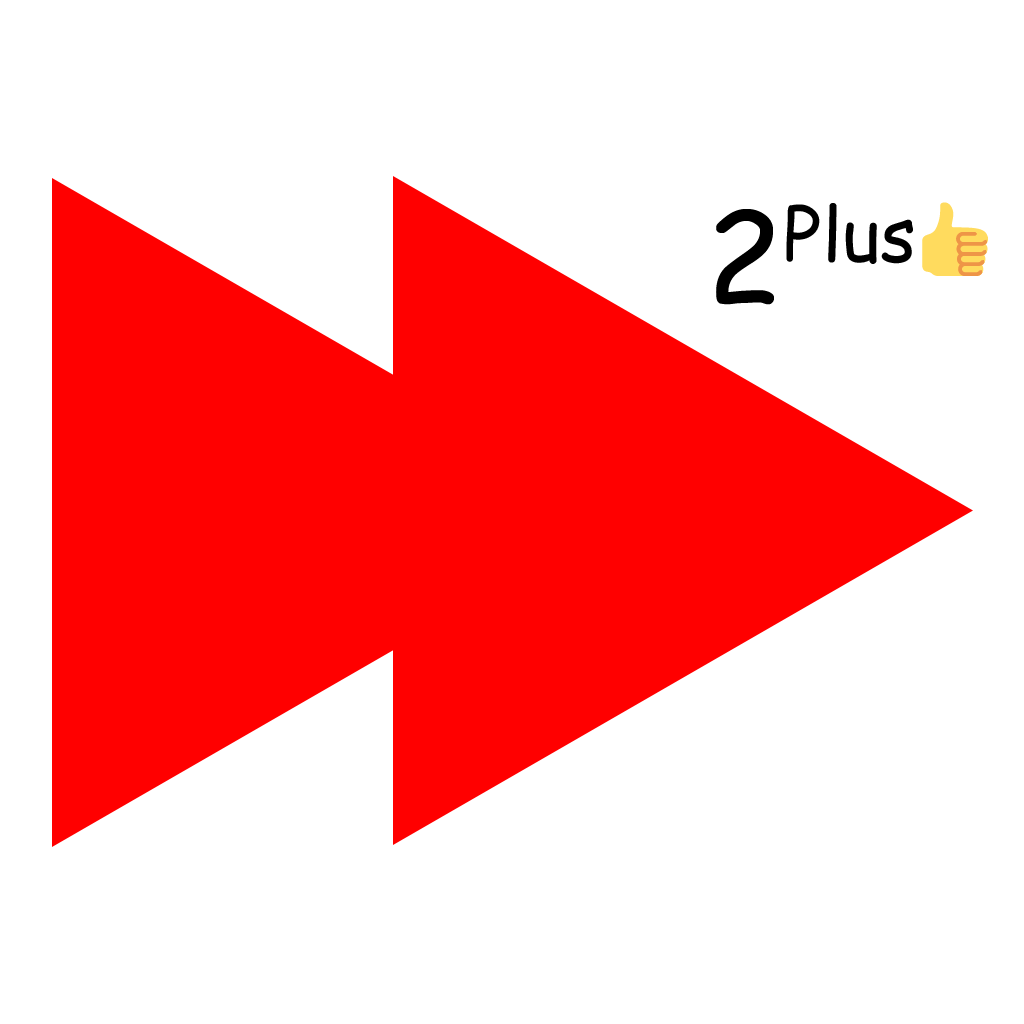
<style>
.page{position:relative;width:1024px;height:1024px;background:#ffffff}
.page>*{position:absolute;margin:0}
.t1{font:126.6px "ComicSansMS"}
.t2{font:126.6px "TwitterColorEmojiSVGinOT"}
</style>
<div class="page">
<p class="t1" style="left:716px;top:202px;width:272px;height:103px">2Plus<span class="t2">👍</span></p>
</div>
